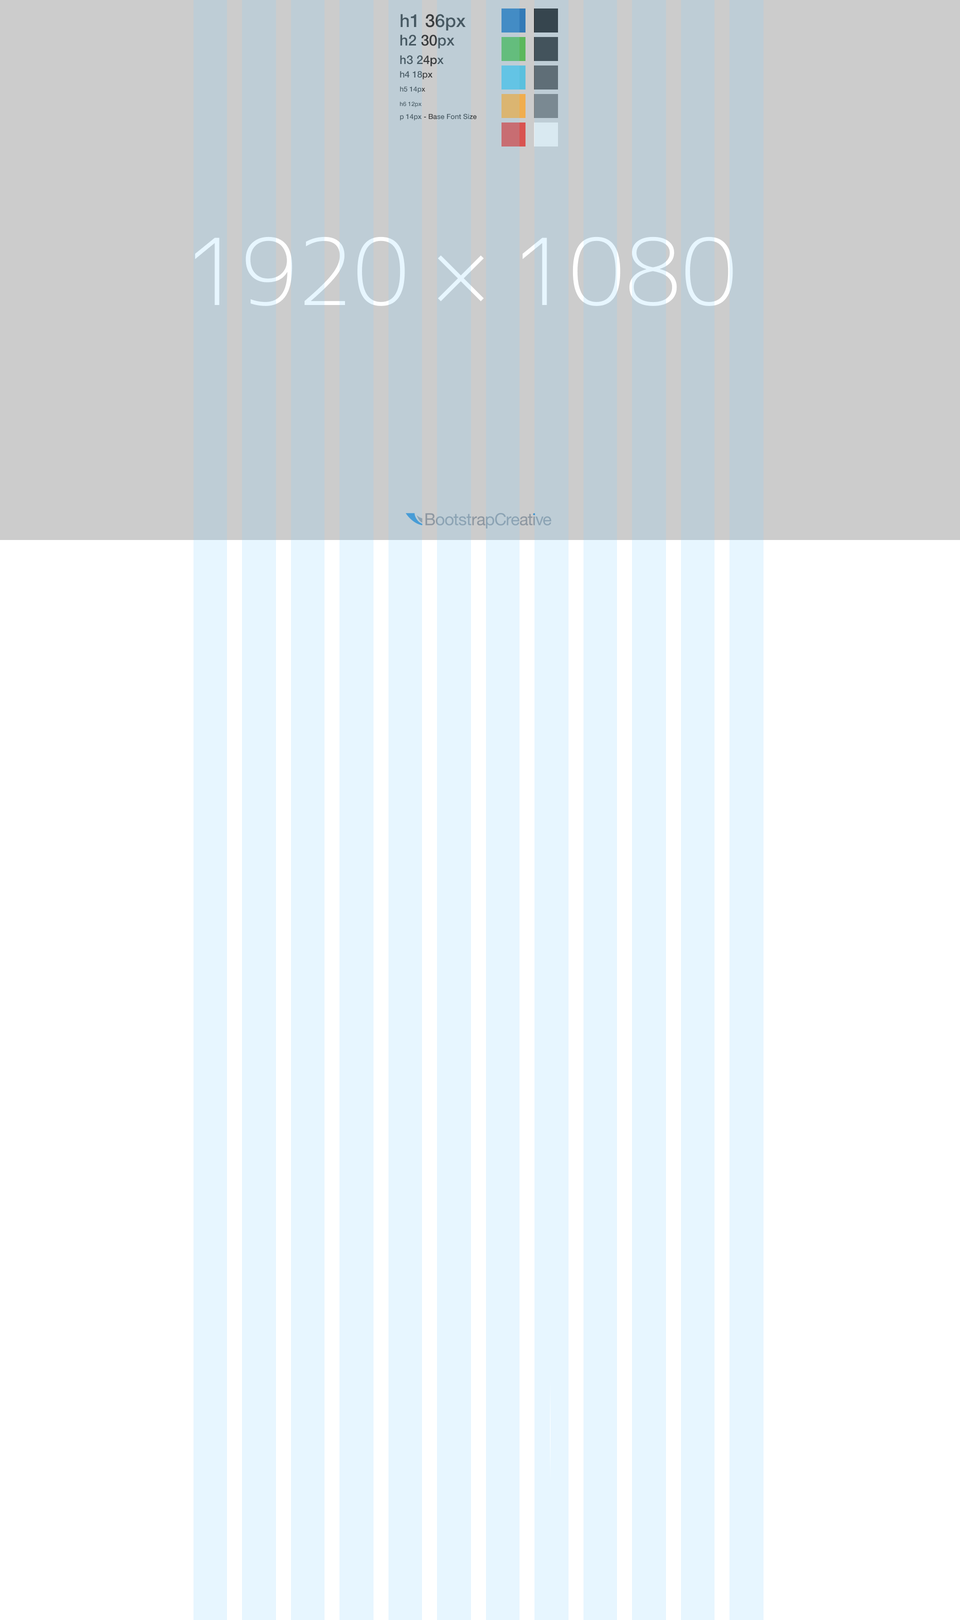
<style>
.page{position:relative;width:960px;height:1620px;background:#ffffff}
.page>*{position:absolute;margin:0}
.t1{font:18px "HelveticaNeue-Medium";color:#475963}
.t2{font:15px "HelveticaNeue-Medium"}
.t3{font:12px "HelveticaNeue-Medium"}
.t4{font:9px "HelveticaNeue-Medium"}
.t5{font:7px "HelveticaNeue-Medium";color:#475963}
.t6{font:6px "HelveticaNeue-Medium";color:#475963}
.t7{font:7px "HelveticaNeue-Medium"}
</style>
<div class="page">
<p class="t1" style="left:400px;top:14px;width:66px;height:16px">h1 36px</p>
<p class="t2" style="left:400px;top:34px;width:54px;height:14px">h2 30px</p>
<p class="t3" style="left:400px;top:55px;width:44px;height:11px">h3 24px</p>
<p class="t4" style="left:400px;top:71px;width:32px;height:9px">h4 18px</p>
<p class="t5" style="left:400px;top:86px;width:26px;height:7px">h5 14px</p>
<p class="t6" style="left:400px;top:102px;width:22px;height:6px">h6 12px</p>
<p class="t7" style="left:400px;top:114px;width:76px;height:6px">p 14px - Base Font Size</p>
</div>
